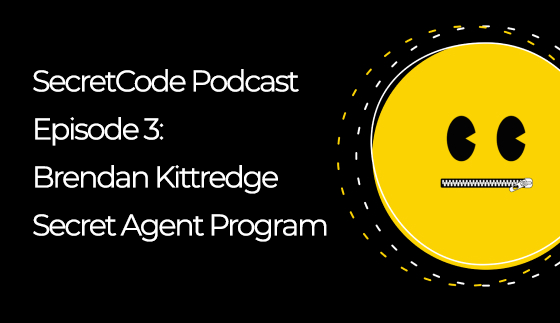
<style>
.page{position:relative;width:560px;height:323px;background:#000000}
.page>*{position:absolute;margin:0}
.t1{font:30px/48px "Montserrat-Regular";letter-spacing:-0.07em;color:#ffffff}
</style>
<div class="page">
<p class="t1" style="left:33px;top:69px;width:294px;height:173px">SecretCode Podcast<br>Episode 3:<br>Brendan Kittredge<br>Secret Agent Program</p>
</div>
